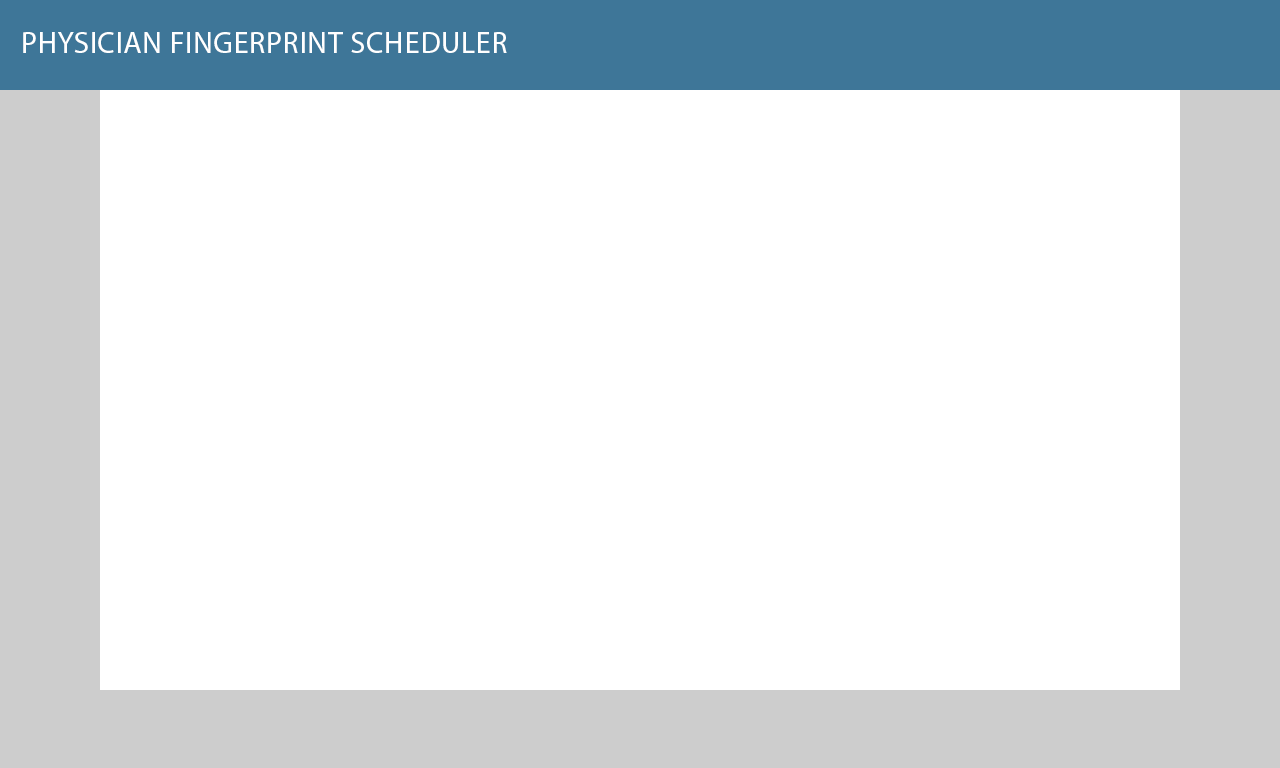
<style>
.page{position:relative;width:1280px;height:768px;background:#ffffff}
.page>*{position:absolute;margin:0}
.t1{font:30px "MyriadPro-Regular";letter-spacing:0.025em;color:#ffffff;text-transform:uppercase}
</style>
<div class="page">
<p class="t1" style="left:23px;top:32px;width:484px;height:21px">PHYSICIAN FINGERPRINT SCHEDULER</p>
</div>
